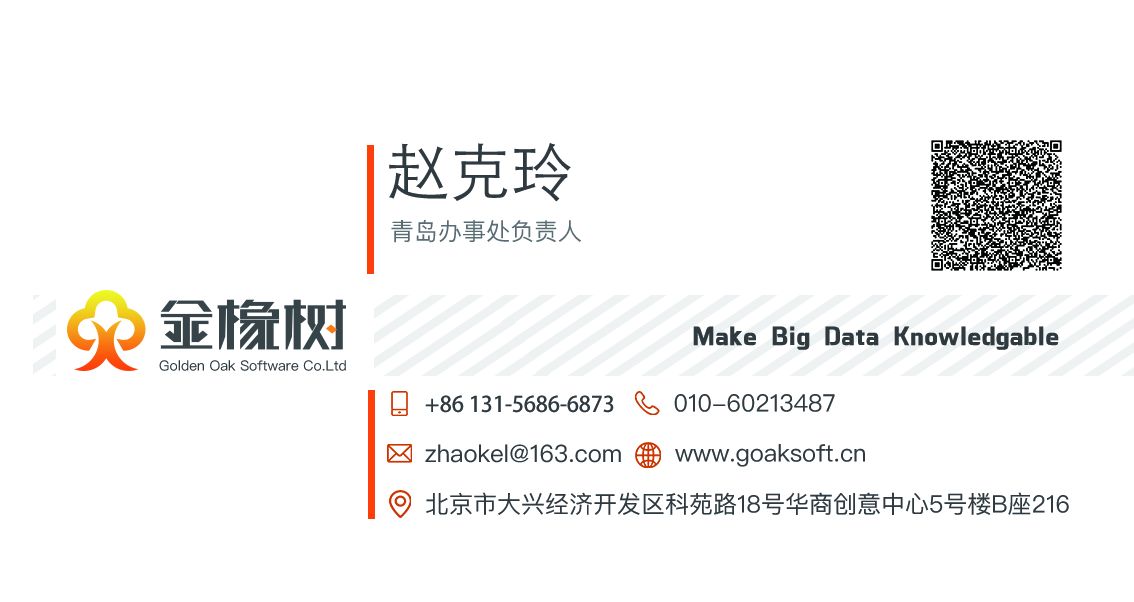
<style>
.page{position:relative;width:1134px;height:602px;background:#ffffff}
.page>*{position:absolute;margin:0}
.t1{font:62px "STHeitiSC-Light";color:#2e3a3f}
.t2{font:24px "PingFangSC-Regular";color:#586d74}
.t3{font:28px "Tensentype-ZhiHeiJ-W5";color:#2e3a3f}
.t4{font:14px "PingFangSC-Regular";color:#2e3a3f}
.t5{font:21.7px "AdobeHeitiStd-Regular";color:#2e3a3f}
.t6{font:24px "PingFangSC-Regular";color:#2e3a3f}
</style>
<div class="page">
<p class="t1" style="left:389px;top:142px;width:182px;height:60px">赵克玲</p>
<p class="t2" style="left:391px;top:219px;width:190px;height:24px">青岛办事处负责人</p>
<p class="t3" style="left:693px;top:326px;width:366px;height:24px">Make Big Data Knowledgable</p>
<p class="t4" style="left:159px;top:360px;width:187px;height:11px">Golden Oak Software Co.Ltd</p>
<p class="t5" style="left:425px;top:395px;width:189px;height:18px">+86 131-5686-6873</p>
<p class="t6" style="left:674px;top:394px;width:161px;height:18px">010-60213487</p>
<p class="t6" style="left:425px;top:444px;width:196px;height:19px">zhaokel@163.com</p>
<p class="t6" style="left:675px;top:444px;width:190px;height:23px">www.goaksoft.cn</p>
<p class="t6" style="left:426px;top:492px;width:643px;height:23px">北京市大兴经济开发区科苑路18号华商创意中心5号楼B座216</p>
</div>
